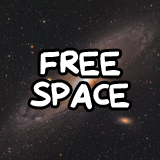
<style>
.page{position:relative;width:160px;height:160px}
.page>*{position:absolute;margin:0}
.t1{font:35.9px/31.9px "QAReports";color:#ffffff}
</style>
<div class="page">
<p class="t1" style="left:30px;top:50px;width:100px;height:60px;text-align:center">FREE<br>SPACE</p>
</div>
